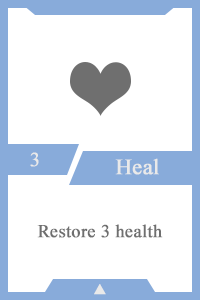
<style>
.page{position:relative;width:200px;height:300px;background:#ffffff}
.page>*{position:absolute;margin:0}
.t1{font:20px "TimesNewRomanPSMT";color:#e9e9e9;font-weight:bold}
.t2{font:22px "TimesNewRomanPSMT";color:#e9e9e9;font-weight:bold}
.t3{font:18px "TimesNewRomanPSMT";color:#6f6f6f;font-weight:bold}
.t4{font:14px "AdobeHeitiStd-Regular";color:#e9e9e9;font-weight:bold}
</style>
<div class="page">
<p class="t1" style="left:30px;top:152px;width:9px;height:15px">3</p>
<p class="t2" style="left:115px;top:158px;width:44px;height:17px">Heal</p>
<p class="t3" style="left:37px;top:224px;width:126px;height:14px">Restore 3 health</p>
<p class="t4" style="left:94px;top:284px;width:12px;height:11px">▲</p>
</div>
